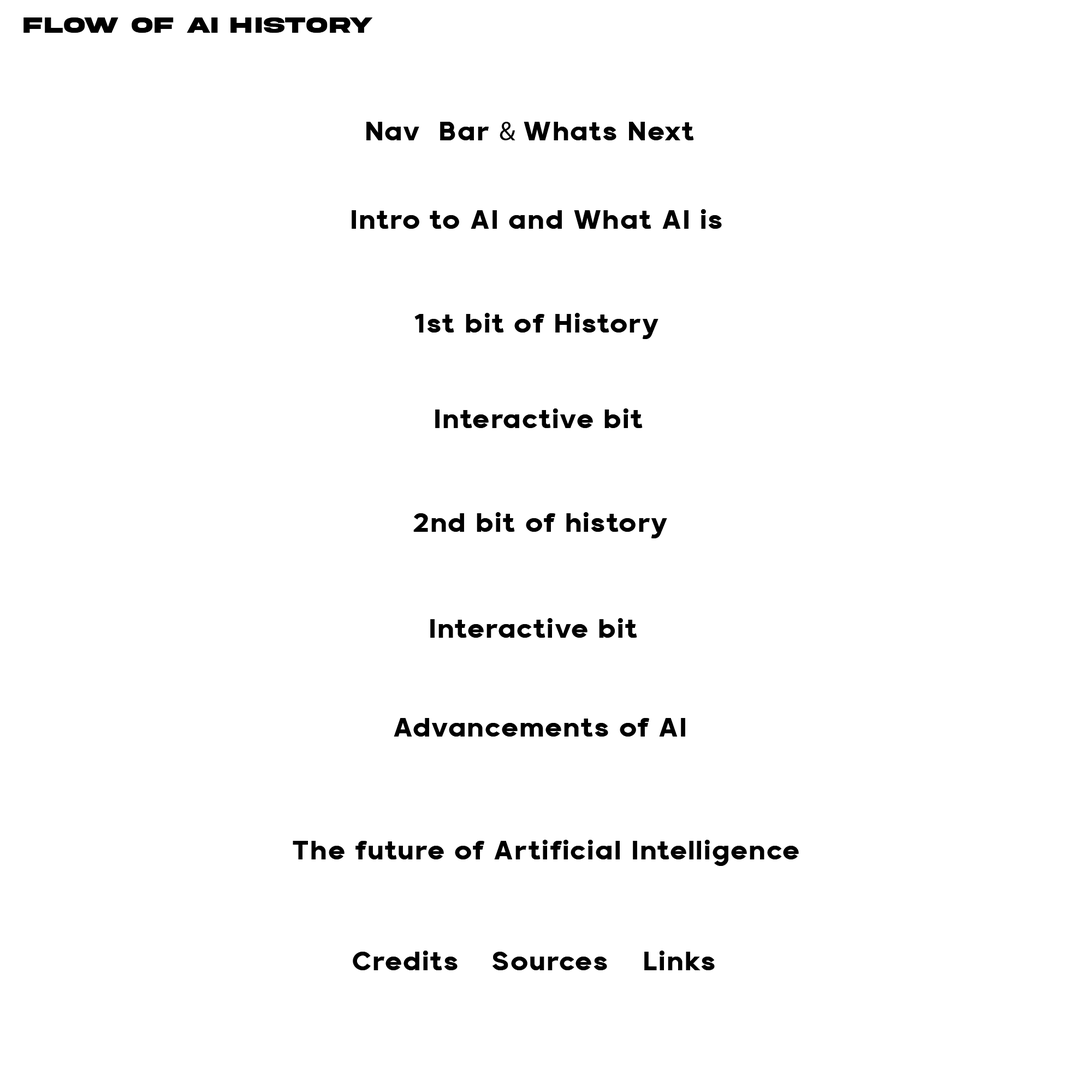
<style>
.page{position:relative;width:1092px;height:1092px;background:#ffffff}
.page>*{position:absolute;margin:0}
.t1{font:22.9px "AkiraExpanded-SuperBold";letter-spacing:0.04em;color:#000000}
.t2{font:26.9px "Retroica";letter-spacing:0.04em;color:#000000}
.t3{font:26.9px "MyriadPro-Regular";letter-spacing:0.04em;color:#000000}
</style>
<div class="page">
<p class="t1" style="left:23px;top:17px;width:350px;height:16px">FLOW of AI HISTORY</p>
<p class="t2" style="left:366px;top:122px;width:328px;height:18px">Nav  Bar <span class="t3">&amp; </span>Whats Next</p>
<p class="t2" style="left:352px;top:209px;width:370px;height:20px">Intro to AI and What AI is</p>
<p class="t2" style="left:414px;top:313px;width:244px;height:26px">1st bit of History</p>
<p class="t2" style="left:435px;top:408px;width:208px;height:20px">Interactive bit</p>
<p class="t2" style="left:413px;top:512px;width:254px;height:26px">2nd bit of history</p>
<p class="t2" style="left:430px;top:618px;width:207px;height:20px">Interactive bit</p>
<p class="t2" style="left:394px;top:718px;width:291px;height:19px">Advancements of AI</p>
<p class="t2" style="left:293px;top:840px;width:506px;height:26px">The future of Artificial Intelligence</p>
<p class="t2" style="left:353px;top:951px;width:105px;height:19px">Credits</p>
<p class="t2" style="left:492px;top:952px;width:115px;height:18px">Sources</p>
<p class="t2" style="left:644px;top:951px;width:71px;height:19px">Links</p>
</div>
